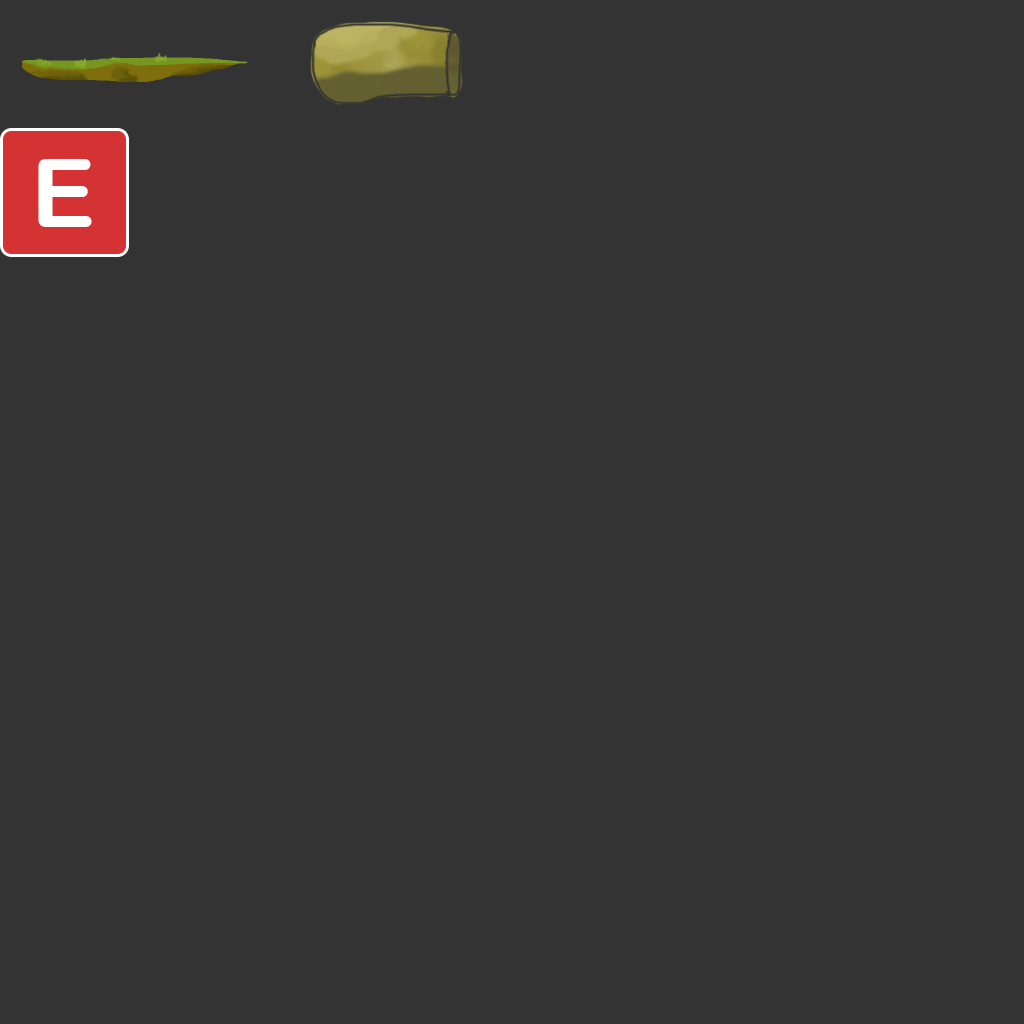
<style>
.page{position:relative;width:1024px;height:1024px;background:#333333}
.page>*{position:absolute;margin:0}
.t1{font:96px "ArialRoundedMTBold";color:#ffffff}
</style>
<div class="page">
<p class="t1" style="left:38px;top:159px;width:54px;height:68px">E</p>
</div>
